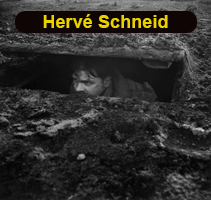
<style>
.page{position:relative;width:211px;height:200px}
.page>*{position:absolute;margin:0}
.t1{font:18px "Arial-BoldMT";letter-spacing:0.005em;color:#ead100}
</style>
<div class="page">
<p class="t1" style="left:43px;top:14px;width:125px;height:14px">Hervé Schneid</p>
</div>
